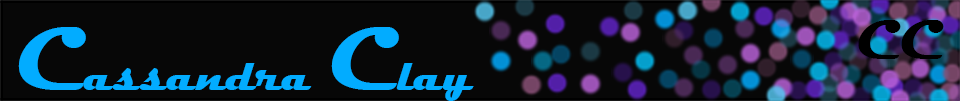
<style>
.page{position:relative;width:960px;height:101px;background:#070707}
.page>*{position:absolute;margin:0}
.t1{font:45.7px "Magneto-Bold";color:#02acff}
.t2{font:91.5px "Magneto-Bold";color:#02acff}
.t3{font:57.2px "Magneto-Bold";color:#000000}
</style>
<div class="page">
<p class="t1" style="left:18px;top:27px;width:456px;height:74px"><span class="t2">C</span>assandra <span class="t2">C</span>lay</p>
<p class="t3" style="left:858px;top:20px;width:86px;height:39px">CC</p>
</div>
